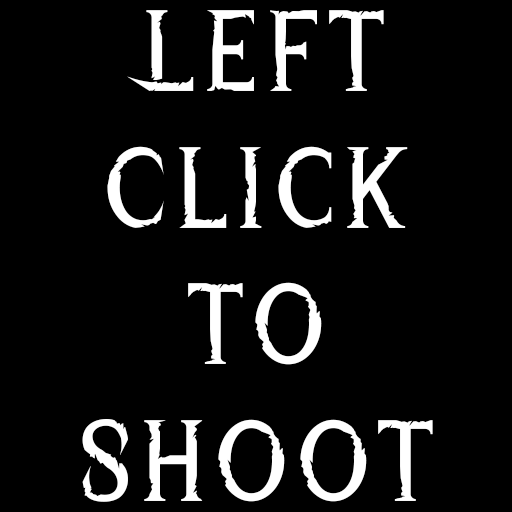
<style>
.page{position:relative;width:512px;height:512px;background:#000000}
.page>*{position:absolute;margin:0}
.t1{font:114px "WreckedShipRegular";letter-spacing:0.05em;color:#ffffff}
</style>
<div class="page">
<p class="t1" style="left:82px;top:10px;width:351px;height:492px;text-align:center">Left Click<br>to Shoot</p>
</div>
